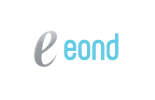
<style>
.page{position:relative;width:155px;height:100px;background:#ffffff}
.page>*{position:absolute;margin:0}
.t1{font:36px "071MKSD-01Medium";letter-spacing:-0.01em;color:#64cce5}
</style>
<div class="page">
<p class="t1" style="left:64px;top:33px;width:55px;height:28px">eond</p>
</div>
